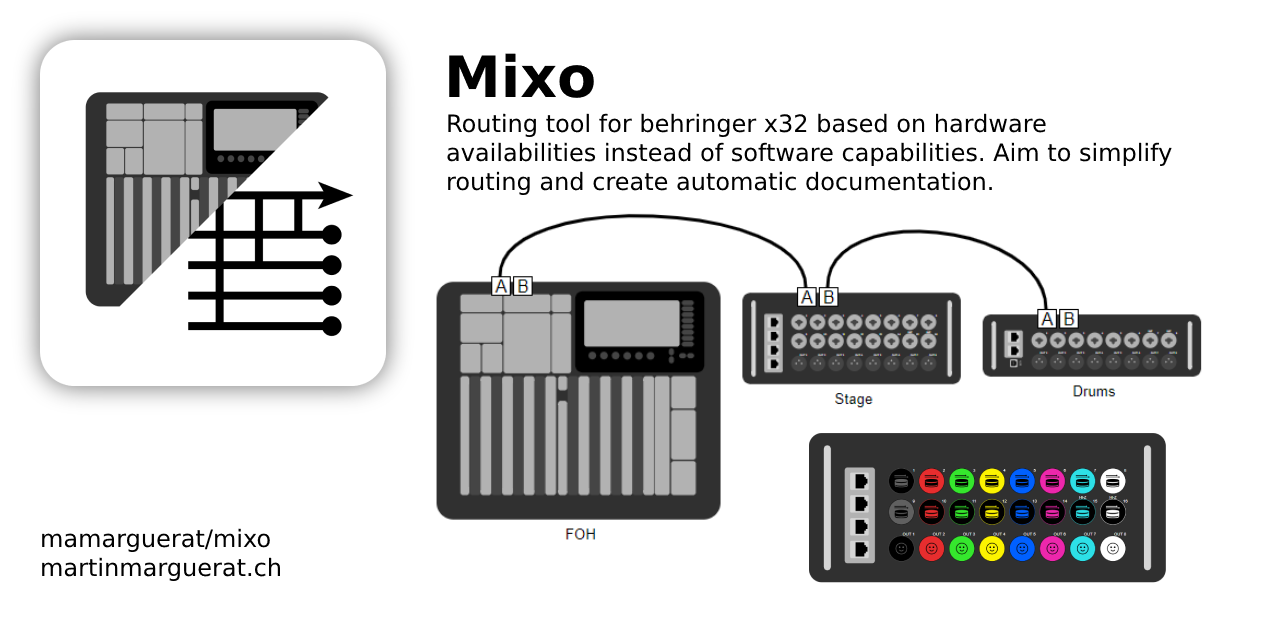
<style>
.page{position:relative;width:1280px;height:640px;background:#ffffff}
.page>*{position:absolute;margin:0}
.t1{font:57px "DejaVuSans-Bold";color:#000000}
.t2{font:24px "DejaVuSans";color:#000000}
</style>
<div class="page">
<p class="t1" style="left:449px;top:53px;width:145px;height:45px">Mixo</p>
<p class="t2" style="left:447px;top:113px;width:725px;height:82px">Routing tool for behringer x32 based on hardware availabilities instead of software capabilities. Aim to simplify routing and create automatic documentation.</p>
<p class="t2" style="left:42px;top:528px;width:238px;height:53px">mamarguerat/mixo<br>martinmarguerat.ch</p>
</div>
